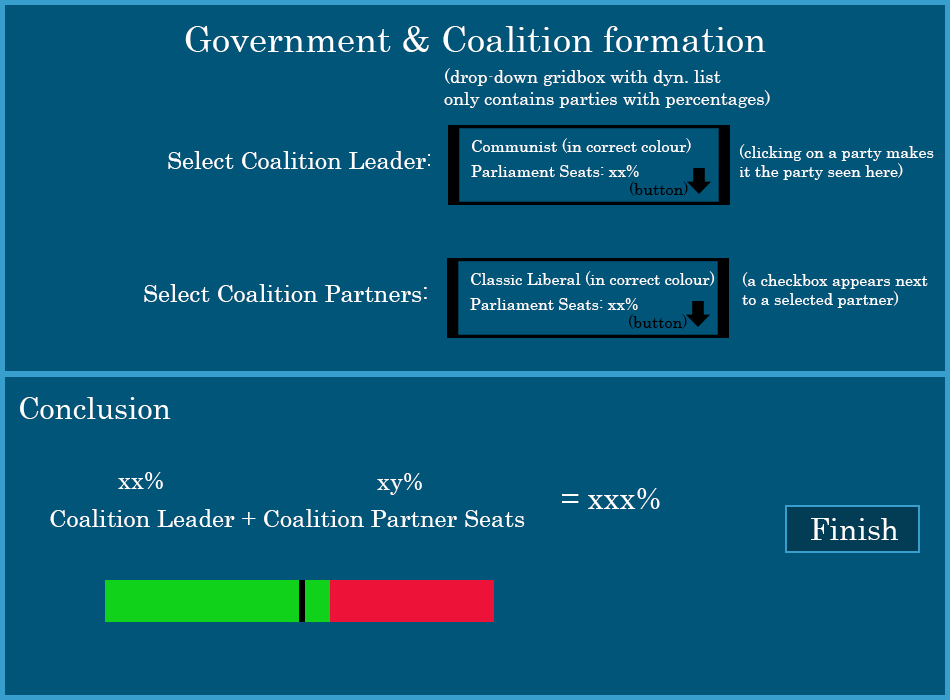
<style>
.page{position:relative;width:950px;height:700px;background:#005578}
.page>*{position:absolute;margin:0}
.t1{font:36px "Century";color:#ffffff}
.t2{font:18px "Century";color:#ffffff}
.t3{font:16px "Century";color:#ffffff}
.t4{font:24px "Century";color:#ffffff}
.t5{font:16px "Century";color:#000000}
.t6{font:30px "Century";color:#ffffff}
</style>
<div class="page">
<p class="t1" style="left:185px;top:26px;width:581px;height:26px">Government &amp; Coalition formation</p>
<p class="t2" style="left:444px;top:68px;width:326px;height:40px">(drop-down gridbox with dyn. list<br>only contains parties with percentages)</p>
<p class="t3" style="left:472px;top:138px;width:219px;height:15px">Communist (in correct colour)</p>
<p class="t3" style="left:739px;top:144px;width:195px;height:36px">(clicking on a party makes<br>it the party seen here)</p>
<p class="t4" style="left:168px;top:151px;width:263px;height:18px">Select Coalition Leader:</p>
<p class="t3" style="left:471px;top:165px;width:168px;height:12px">Parliament Seats: xx%</p>
<p class="t5" style="left:629px;top:181px;width:59px;height:15px">(button)</p>
<p class="t3" style="left:471px;top:271px;width:244px;height:15px">Classic Liberal (in correct colour)</p>
<p class="t3" style="left:742px;top:272px;width:186px;height:36px">(a checkbox appears next<br>to a selected partner)</p>
<p class="t4" style="left:144px;top:284px;width:283px;height:18px">Select Coalition Partners:</p>
<p class="t3" style="left:470px;top:298px;width:168px;height:12px">Parliament Seats: xx%</p>
<p class="t5" style="left:628px;top:314px;width:59px;height:15px">(button)</p>
<p class="t6" style="left:20px;top:397px;width:151px;height:22px">Conclusion</p>
<p class="t4" style="left:118px;top:472px;width:45px;height:17px">xx%</p>
<p class="t4" style="left:377px;top:473px;width:45px;height:22px">xy%</p>
<p class="t6" style="left:562px;top:488px;width:98px;height:21px">= xxx%</p>
<p class="t4" style="left:50px;top:509px;width:475px;height:18px">Coalition Leader + Coalition Partner Seats</p>
<p class="t6" style="left:811px;top:518px;width:87px;height:22px">Finish</p>
</div>
